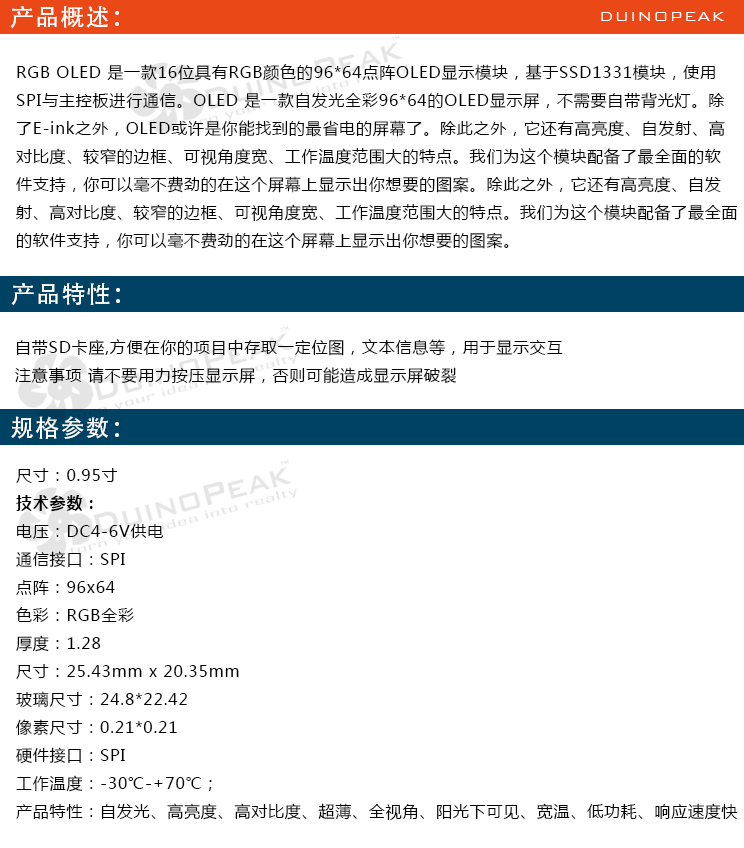
<style>
.page{position:relative;width:744px;height:848px;background:#ffffff}
.page>*{position:absolute;margin:0}
.t1{font:24px "AdobeHeitiStd-Regular";letter-spacing:0.05em;color:#ffffff}
.t2{font:18px "BankGothicBT-Light";letter-spacing:0.05em;color:#ffffff}
.t3{font:16px "MicrosoftYaHei";letter-spacing:0.05em;color:#000000}
.t4{font:16px "MicrosoftYaHei-Bold";letter-spacing:0.05em;color:#000000}
</style>
<div class="page">
<p class="t1" style="left:10px;top:6px;width:109px;height:23px">产品概述：</p>
<p class="t2" style="left:601px;top:12px;width:124px;height:9px">DUINOPEAK</p>
<p class="t3" style="left:16px;top:64px;width:722px;height:185px">RGB OLED 是一款16位具有RGB颜色的96*64点阵OLED显示模块，基于SSD1331模块，使用<br>SPI与主控板进行通信。OLED 是一款自发光全彩96*64的OLED显示屏，不需要自带背光灯。除<br>了E-ink之外，OLED或许是你能找到的最省电的屏幕了。除此之外，它还有高亮度、自发射、高<br>对比度、较窄的边框、可视角度宽、工作温度范围大的特点。我们为这个模块配备了最全面的软<br>件支持，你可以毫不费劲的在这个屏幕上显示出你想要的图案。除此之外，它还有高亮度、自发<br>射、高对比度、较窄的边框、可视角度宽、工作温度范围大的特点。我们为这个模块配备了最全面<br>的软件支持，你可以毫不费劲的在这个屏幕上显示出你想要的图案。</p>
<p class="t1" style="left:11px;top:282px;width:109px;height:24px">产品特性：</p>
<p class="t3" style="left:15px;top:339px;width:548px;height:45px">自带SD卡座,方便在你的项目中存取一定位图，文本信息等，用于显示交互<br>注意事项 请不要用力按压显示屏，否则可能造成显示屏破裂</p>
<p class="t1" style="left:11px;top:416px;width:108px;height:23px">规格参数：</p>
<p class="t3" style="left:16px;top:468px;width:722px;height:352px">尺寸：0.95寸<br><span class="t4">技术参数：<br></span>电压：DC4-6V供电<br>通信接口：SPI<br>点阵：96x64<br>色彩：RGB全彩<br>厚度：1.28<br>尺寸：25.43mm x 20.35mm<br>玻璃尺寸：24.8*22.42<br>像素尺寸：0.21*0.21<br>硬件接口：SPI<br>工作温度：-30℃-+70℃；<br>产品特性：自发光、高亮度、高对比度、超薄、全视角、阳光下可见、宽温、低功耗、响应速度快</p>
</div>
